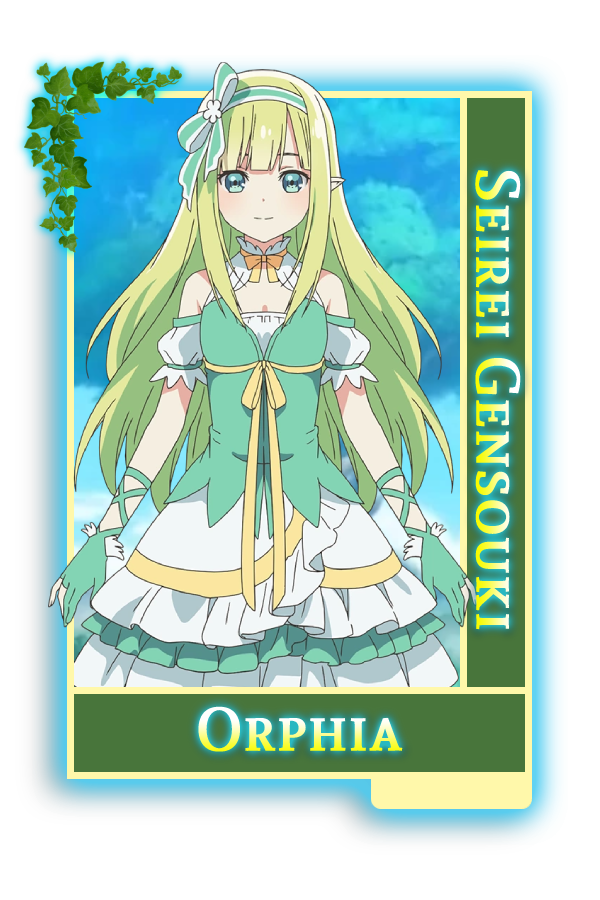
<style>
.page{position:relative;width:600px;height:900px;background:#ffffff}
.page>*{position:absolute;margin:0}
.t1{font:61px "AndadaSC-Regular";font-weight:bold}
</style>
<div class="page">
<p class="t1" style="left:475px;top:170px;width:46px;height:460px;rotate:90deg">Seirei Gensouki</p>
<p class="t1" style="left:198px;top:706px;width:205px;height:46px">Orphia</p>
</div>
